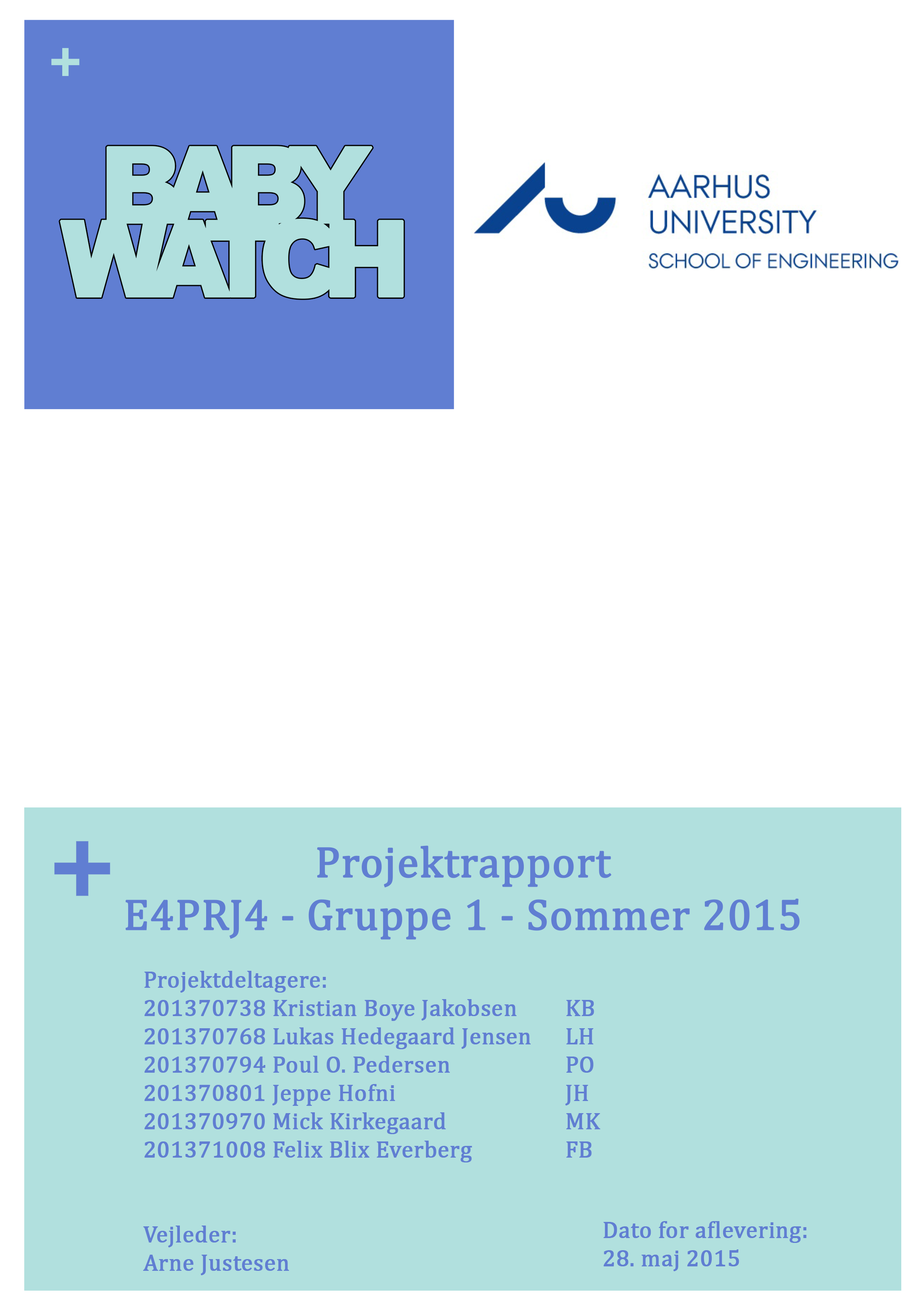
<style>
.page{position:relative;width:913px;height:1306px;background:#ffffff}
.page>*{position:absolute;margin:0}
.t1{font:43.8px "Cambria";color:#607ed2;font-weight:bold}
.t2{font:23.6px "Cambria";color:#607ed2;font-weight:bold}
</style>
<div class="page">
<p class="t1" style="left:125px;top:845px;width:675px;height:94px;text-align:center">Projektrapport<br>E4PRJ4 - Gruppe 1 - Sommer 2015</p>
<p class="t2" style="left:143px;top:971px;width:458px;height:304px">Projektdeltagere:<br>201370738 Kristian Boye Jakobsen    KB<br>201370768 Lukas Hedegaard Jensen   LH<br>201370794 Poul O. Pedersen        PO<br>201370801 Jeppe Hofni            JH<br>201370970 Mick Kirkegaard         MK<br>201371008 Felix Blix Everberg       FB<br><br><br>Vejleder:<br>Arne Justesen</p>
<p class="t2" style="left:604px;top:1221px;width:203px;height:50px">Dato for aflevering:<br>28. maj 2015</p>
</div>
